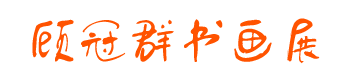
<style>
.page{position:relative;width:358px;height:80px;background:#ffffff}
.page>*{position:absolute;margin:0}
.t1{font:50px "FZZJ-TTMBFONT";color:#ff5300}
</style>
<div class="page">
<p class="t1" style="left:32px;top:18px;width:288px;height:46px">顾冠群书画展</p>
</div>
